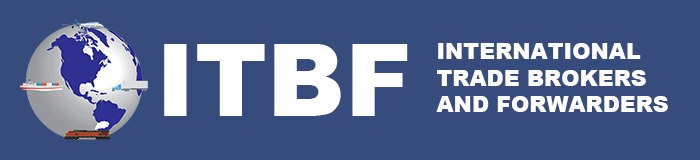
<style>
.page{position:relative;width:700px;height:160px;background:#364c7d}
.page>*{position:absolute;margin:0}
.t1{font:100px "Arial-Black";color:#ffffff}
.t2{font:22px "Arial-Black";color:#ffffff}
</style>
<div class="page">
<p class="t1" style="left:164px;top:44px;width:244px;height:72px">ITBF</p>
<p class="t2" style="left:436px;top:43px;width:232px;height:69px">INTERNATIONAL<br>TRADE BROKERS<br>AND FORWARDERS</p>
</div>
